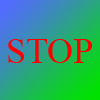
<style>
.page{position:relative;width:100px;height:100px}
.page>*{position:absolute;margin:0}
.t1{font:36px "TimesNewRomanPSMT";color:#ff0000}
</style>
<div class="page">
<p class="t1" style="left:8px;top:39px;width:84px;height:24px">STOP</p>
</div>
